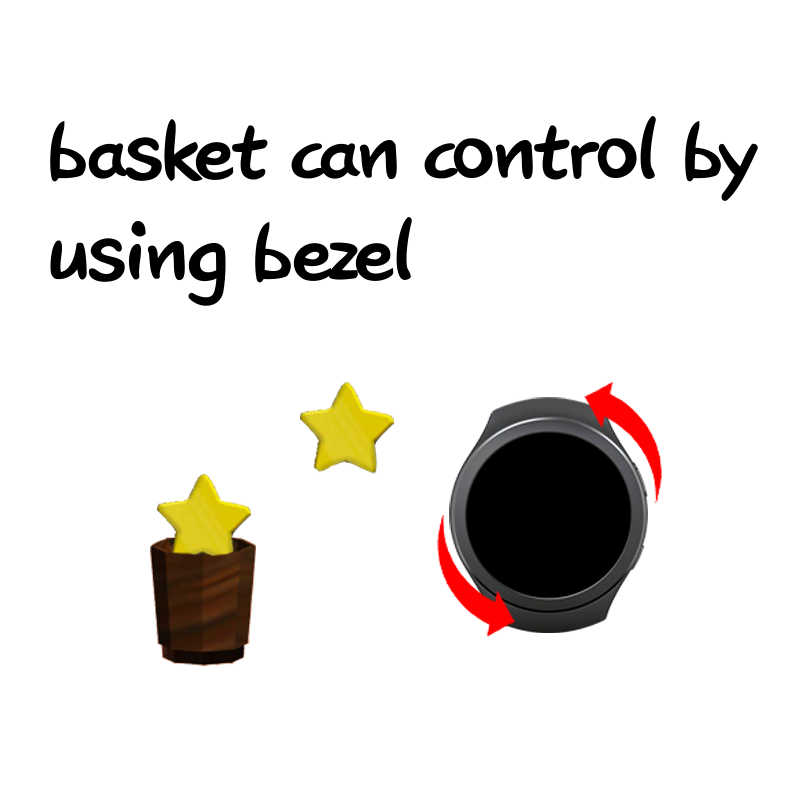
<style>
.page{position:relative;width:800px;height:800px;background:#ffffff}
.page>*{position:absolute;margin:0}
.t1{font:99.7px/100.7px "DXHgrmB-KSCpc-EUC-H";letter-spacing:-0.025em;color:#000000}
</style>
<div class="page">
<p class="t1" style="left:50px;top:116px;width:708px;height:190px">basket can control by <br>using bezel</p>
</div>
